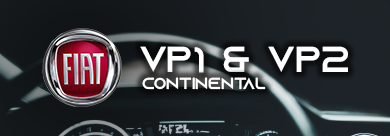
<style>
.page{position:relative;width:390px;height:136px}
.page>*{position:absolute;margin:0}
.t1{font:36px "AzonixRegular";color:#ffffff}
.t2{font:16px "AzonixRegular";color:#ffffff}
</style>
<div class="page">
<p class="t1" style="left:140px;top:46px;width:208px;height:27px">VP1 &amp; VP2</p>
<p class="t2" style="left:142px;top:77px;width:124px;height:13px">continental</p>
</div>
